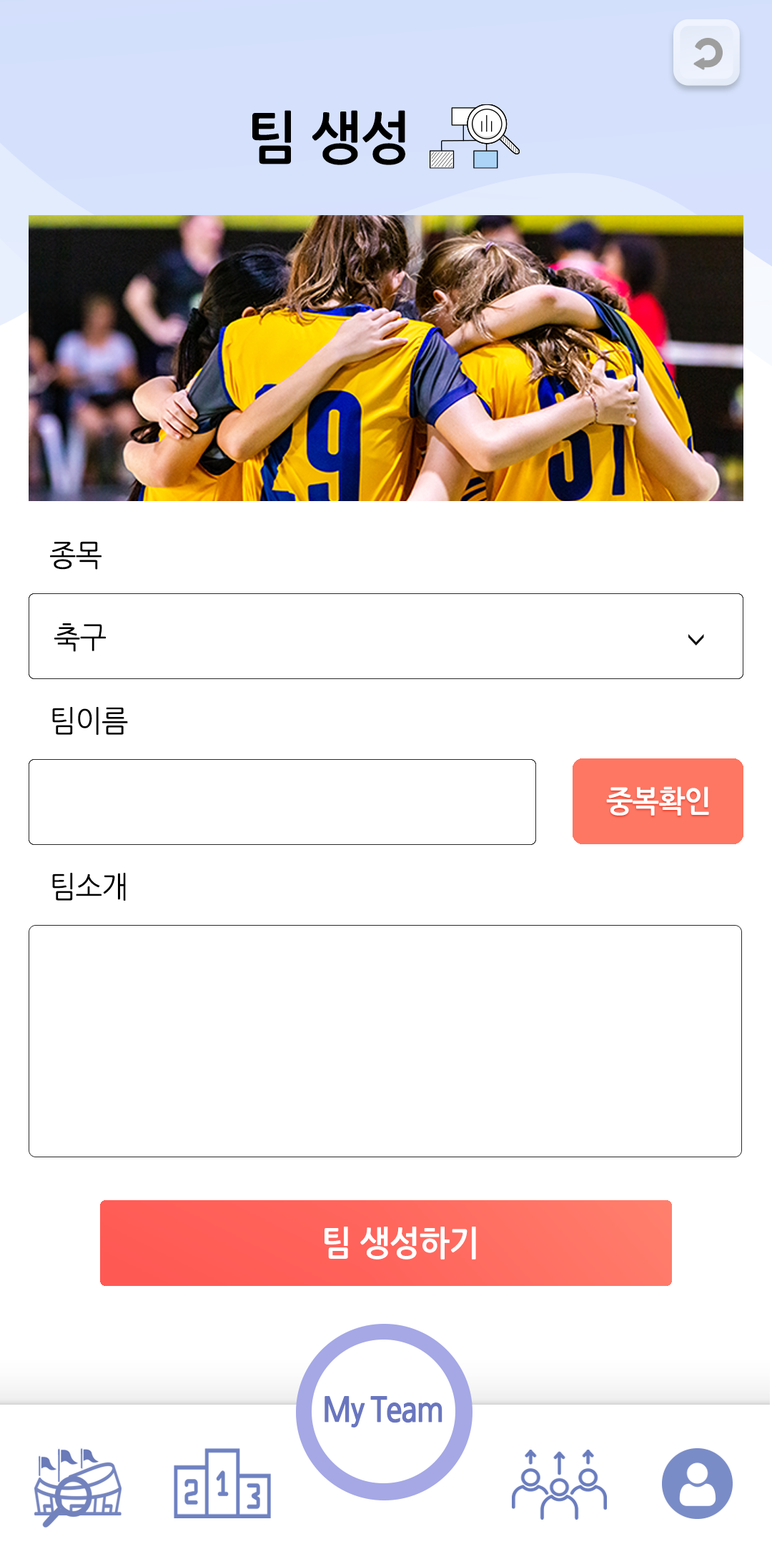
<style>
.page{position:relative;width:772px;height:1544px;background:#ffffff}
.page>*{position:absolute;margin:0}
.t1{font:57.2px "NanumGothicBold";letter-spacing:-0.025em;color:#000000;scale:0.95 1}
.t2{font:30px "NanumGothic";letter-spacing:-0.025em;color:#000000;scale:0.95 1}
.t3{font:30px "NanumGothicBold";letter-spacing:-0.025em;color:#ffffff;scale:0.95 1}
.t4{font:34.3px "NanumGothicBold";letter-spacing:-0.025em;color:#ffffff;scale:0.95 1}
</style>
<div class="page">
<p class="t1" style="left:252px;top:110px;width:153px;height:55px">팀 생성</p>
<p class="t2" style="left:50px;top:541px;width:52px;height:29px">종목</p>
<p class="t2" style="left:54px;top:623px;width:52px;height:29px">축구</p>
<p class="t2" style="left:52px;top:707px;width:76px;height:28px">팀이름</p>
<p class="t3" style="left:606px;top:786px;width:103px;height:30px">중복확인</p>
<p class="t2" style="left:52px;top:873px;width:74px;height:28px">팀소개</p>
<p class="t4" style="left:325px;top:1227px;width:151px;height:33px">팀 생성하기</p>
</div>
